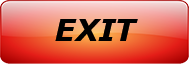
<style>
.page{position:relative;width:189px;height:64px}
.page>*{position:absolute;margin:0}
.t1{font:30px "Verdana-BoldItalic";color:#000000}
</style>
<div class="page">
<p class="t1" style="left:55px;top:19px;width:83px;height:22px">EXIT</p>
</div>
